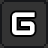
<style>
.page{position:relative;width:48px;height:48px;background:#333333}
.page>*{position:absolute;margin:0}
.t1{font:36px "Kenney-Future";color:#ffffff}
</style>
<div class="page">
<p class="t1" style="left:12px;top:12px;width:23px;height:23px">G</p>
</div>
